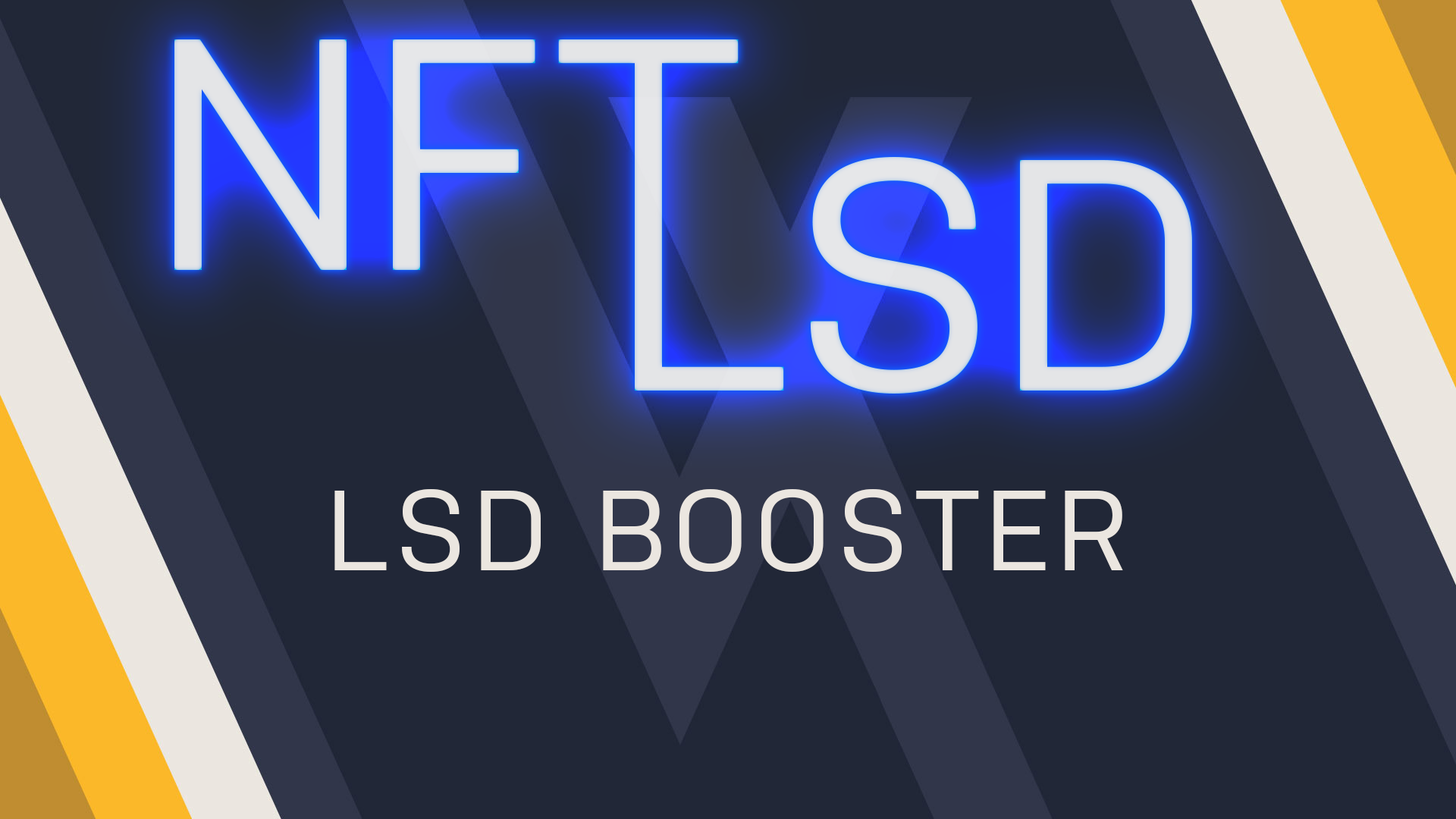
<style>
.page{position:relative;width:1456px;height:819px;background:#212737}
.page>*{position:absolute;margin:0}
.t1{font:329.3px "Nudista";color:#ebe6e0}
.t2{font:329.3px "Nudista";letter-spacing:0.06em;color:#ebe6e0}
.t3{font:113.7px "Nudista";letter-spacing:0.06em;color:#ebe6e0}
</style>
<div class="page">
<p class="t1" style="left:174px;top:39px;width:565px;height:231px">N<span class="t2">F</span>T</p>
<p class="t1" style="left:635px;top:157px;width:557px;height:237px">LSD</p>
<p class="t3" style="left:334px;top:489px;width:789px;height:83px">LSD BOOSTER</p>
</div>
